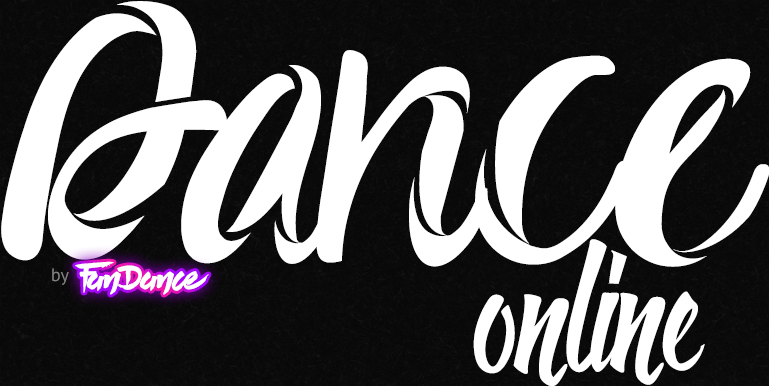
<style>
.page{position:relative;width:769px;height:386px;background:#ffffff}
.page>*{position:absolute;margin:0}
.t1{font:358px "Swape";color:#ffffff}
.t2{font:158px "Handletter";color:#ffffff}
.t3{font:18px "PTSans-Regular";color:#818181}
.t4{font:31.9px "LastParadise";letter-spacing:-0.02em;color:#ffffff}
.t5{font:31.9px "LastParadise";letter-spacing:-0.2em;color:#ffffff}
.t6{font:31.9px "LastParadise";color:#ffffff}
.t7{font:31.9px "LastParadise";letter-spacing:-0.04em;color:#ffffff}
</style>
<div class="page">
<p class="t1" style="left:1px;top:1px;width:769px;height:266px">Dance</p>
<p class="t2" style="left:473px;top:239px;width:232px;height:148px;rotate:-1deg">online</p>
<p class="t3" style="left:52px;top:268px;width:17px;height:17px">by</p>
<p class="t4" style="left:75px;top:261px;width:134px;height:34px"><span class="t5">F</span>a<span class="t6">n </span><span class="t7">D</span>anc<span class="t6">e</span></p>
</div>
